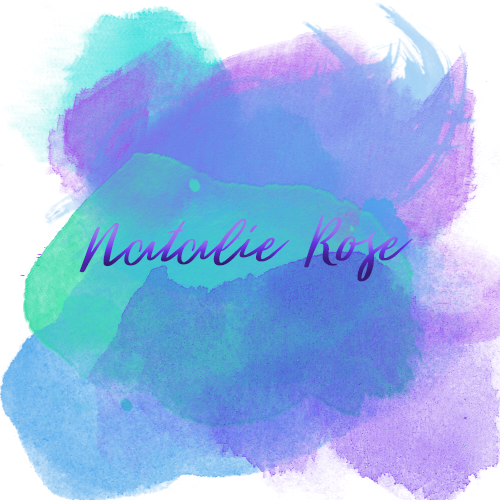
<style>
.page{position:relative;width:500px;height:500px}
.page>*{position:absolute;margin:0}
.t1{font:90px "TheWoodlands-Regular"}
</style>
<div class="page">
<p class="t1" style="left:79px;top:215px;width:334px;height:67px;rotate:-1deg">Natalie Rose</p>
</div>
